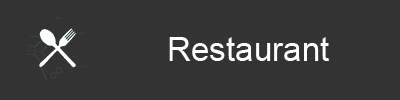
<style>
.page{position:relative;width:400px;height:100px;background:#333333}
.page>*{position:absolute;margin:0}
.t1{font:33.3px "ArialMT";color:#ffffff}
</style>
<div class="page">
<p class="t1" style="left:169px;top:37px;width:160px;height:24px">Restaurant</p>
</div>
